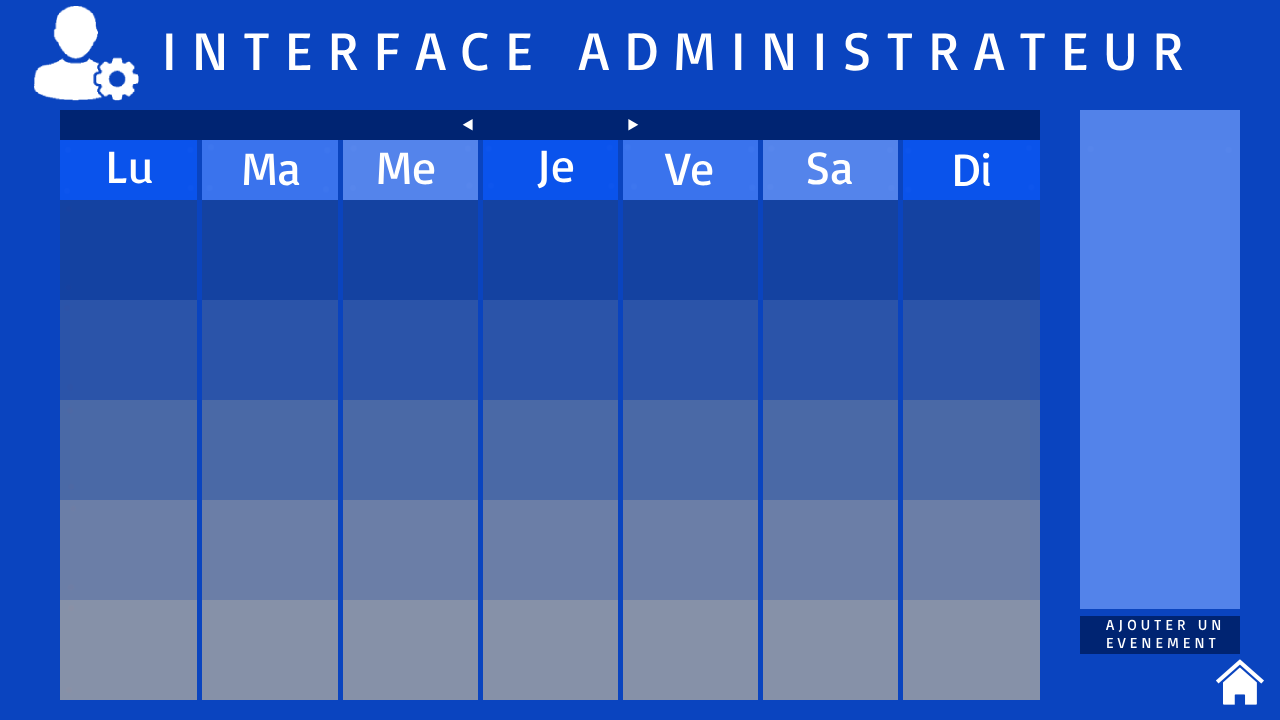
<style>
.page{position:relative;width:1280px;height:720px;background:#0a44bf}
.page>*{position:absolute;margin:0}
.t1{font:55px "Basic-Regular";color:#ffffff}
.t2{font:15px "Basic-Regular";color:#ffffff}
</style>
<div class="page">
<p class="t1" style="left:166px;top:32px;width:1017px;height:39px">I N T E R F A C E   A D M I N I S T R A T E U R</p>
<p class="t2" style="left:1105px;top:619px;width:116px;height:29px">A J O U T E R   U N   E V E N E M E N T</p>
</div>
